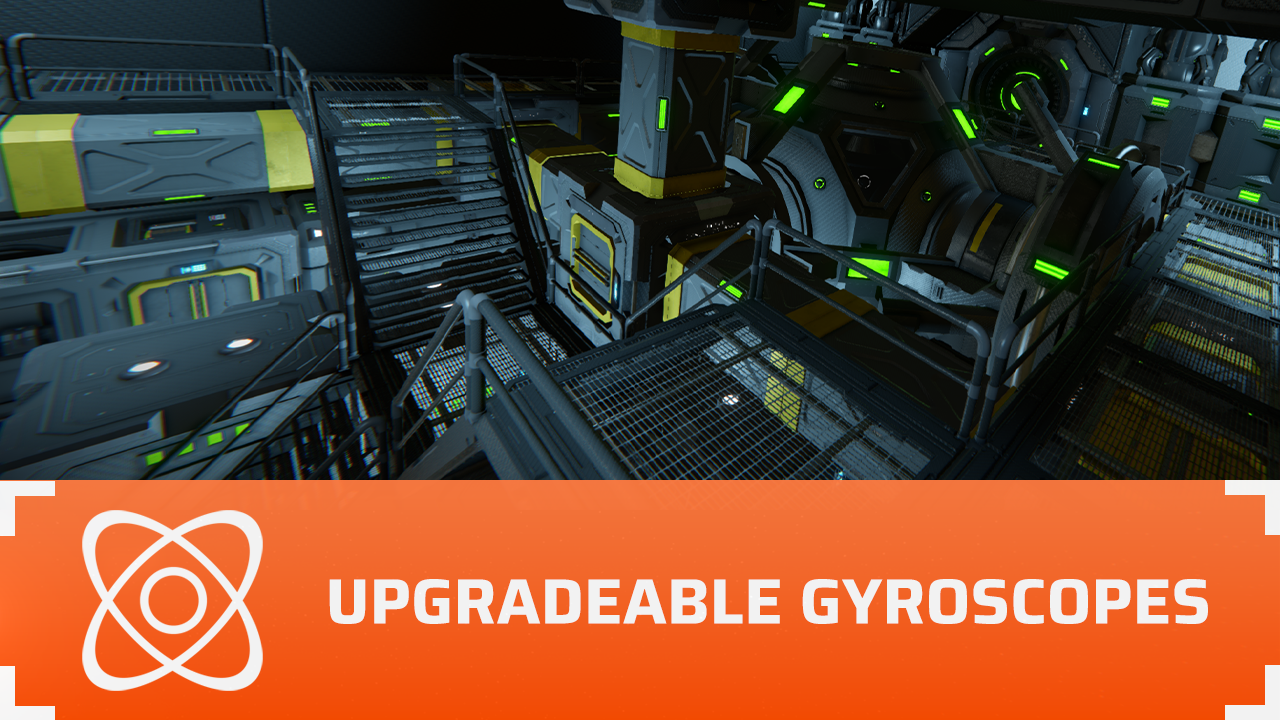
<style>
.page{position:relative;width:1280px;height:720px}
.page>*{position:absolute;margin:0}
.t1{font:64px "SairaRoman-Bold";color:#ffffff;text-transform:uppercase;font-weight:bold}
</style>
<div class="page">
<p class="t1" style="left:329px;top:579px;width:879px;height:45px">Upgradeable Gyroscopes</p>
</div>
